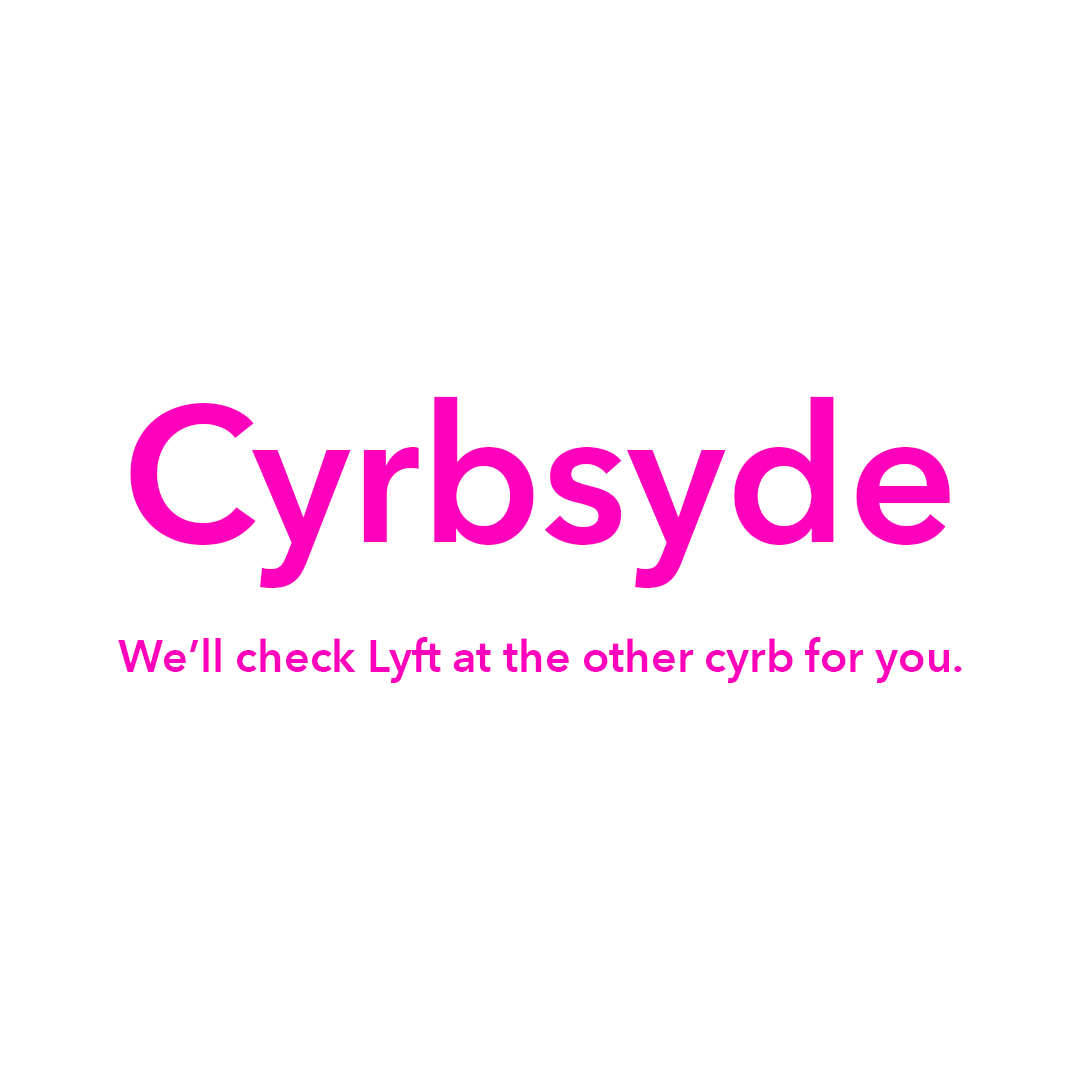
<style>
.page{position:relative;width:1080px;height:1080px;background:#ffffff}
.page>*{position:absolute;margin:0}
.t1{font:192px "AvenirNext-DemiBold";color:#ff00bc}
.t2{font:45px "AvenirNext-DemiBold";color:#ff00bc}
</style>
<div class="page">
<p class="t1" style="left:130px;top:396px;width:820px;height:192px">Cyrbsyde</p>
<p class="t2" style="left:118px;top:637px;width:844px;height:46px">We’ll check Lyft at the other cyrb for you.</p>
</div>
